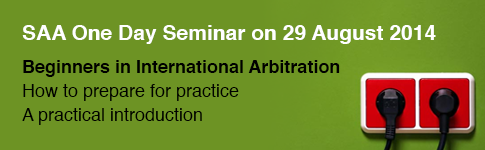
<style>
.page{position:relative;width:485px;height:150px;background:#6d9324}
.page>*{position:absolute;margin:0}
.t1{font:21px "Helvetica-Bold";color:#ffffff}
.t2{font:18px/24px "Helvetica";color:#000000}
.t3{font:18px/24px "Helvetica-Bold";color:#000000}
</style>
<div class="page">
<p class="t1" style="left:22px;top:25px;width:414px;height:19px">SAA One Day Seminar on 29 August 2014</p>
<p class="t2" style="left:22px;top:60px;width:318px;height:65px"><span class="t3">Beginners in International Arbitration<br></span>How to prepare for practice<br>A practical introduction</p>
</div>
